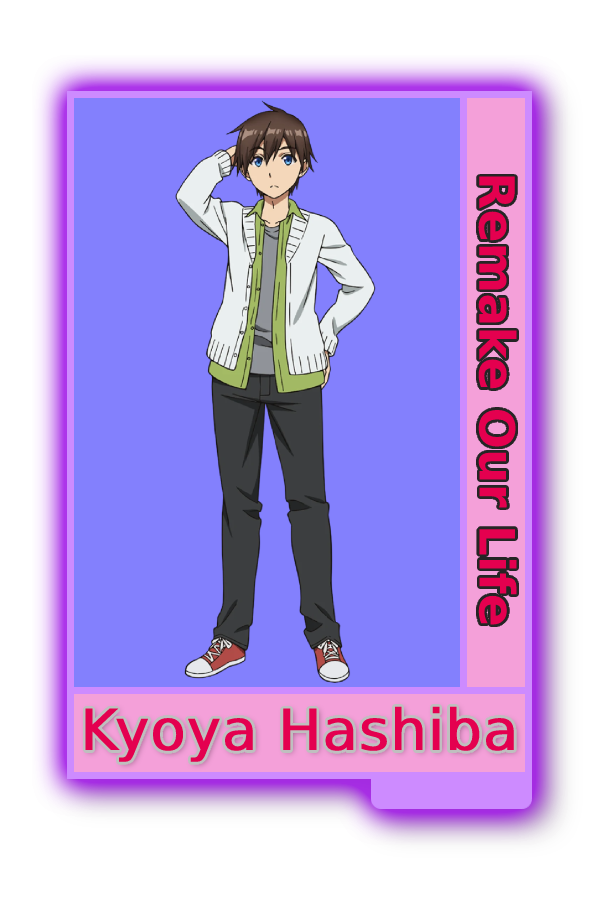
<style>
.page{position:relative;width:600px;height:900px;background:#8380fd}
.page>*{position:absolute;margin:0}
.t1{font:48.8px "MADETOMMY-Bold";color:#e4004f}
.t2{font:57px "CoolveticaRg-Regular";color:#e4004f;font-weight:bold}
</style>
<div class="page">
<p class="t1" style="left:478px;top:176px;width:39px;height:449px;rotate:90deg">Remake Our Life</p>
<p class="t2" style="left:85px;top:706px;width:429px;height:56px">Kyoya Hashiba</p>
</div>
